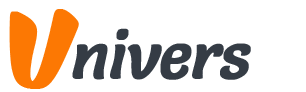
<style>
.page{position:relative;width:306px;height:92px;background:#ffffff}
.page>*{position:absolute;margin:0}
.t1{font:67.3px "KomikaBoogie";letter-spacing:-0.02em;color:#fc7803;font-weight:bold;scale:1.37 1}
.t2{font:66.7px "Salsa-Regular";letter-spacing:-0.02em;color:#353c45;font-weight:bold;font-style:italic;scale:0.95 1}
</style>
<div class="page">
<p class="t1" style="left:9px;top:9px;width:70px;height:80px">U</p>
<p class="t2" style="left:72px;top:28px;width:179px;height:52px">nivers</p>
</div>
